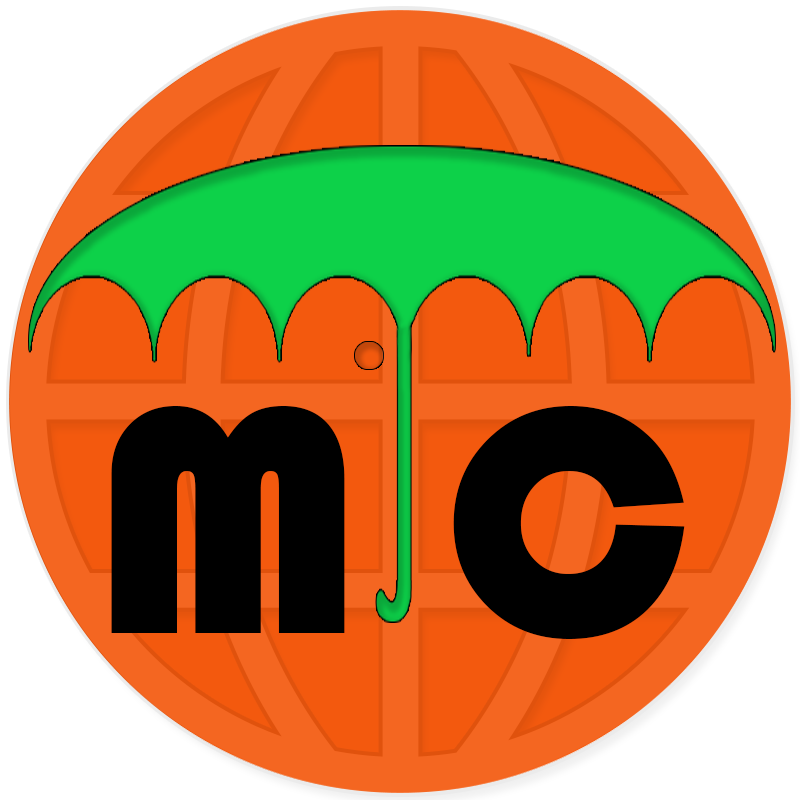
<style>
.page{position:relative;width:800px;height:800px;background:#f46621}
.page>*{position:absolute;margin:0}
.t1{font:332.3px "Bauhaus93";color:#000000}
</style>
<div class="page">
<p class="t1" style="left:111px;top:405px;width:574px;height:234px">M C</p>
</div>
